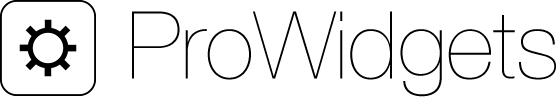
<style>
.page{position:relative;width:556px;height:97px;background:#ffffff}
.page>*{position:absolute;margin:0}
.t1{font:93.8px "HelveticaNeue-UltraLight";color:#000000}
</style>
<div class="page">
<p class="t1" style="left:132px;top:11px;width:424px;height:86px">ProWidgets</p>
</div>
